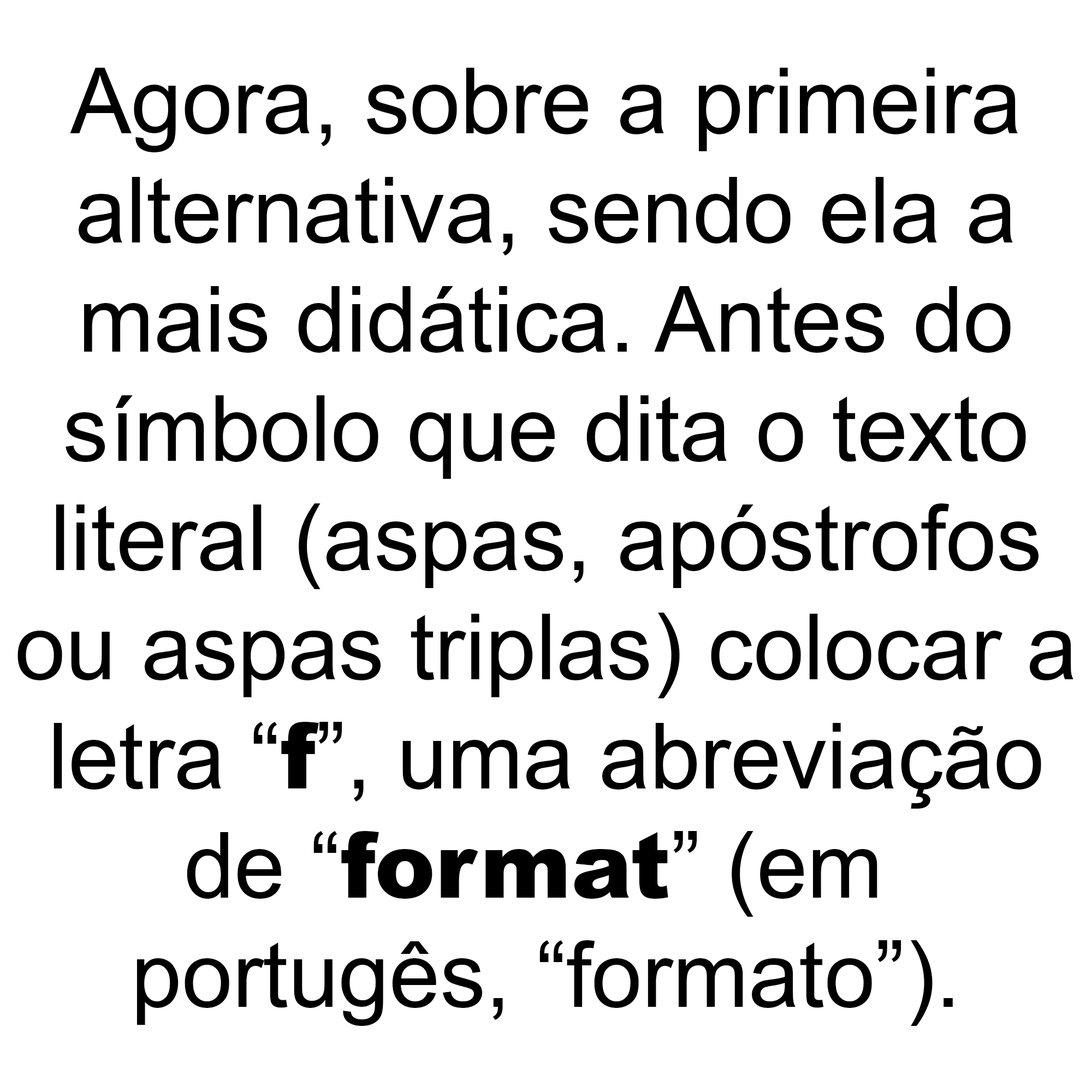
<style>
.page{position:relative;width:1092px;height:1092px;background:#ffffff}
.page>*{position:absolute;margin:0}
.t1{font:91px "ArialMT";color:#000000}
.t2{font:91px "Arial-Black";color:#000000}
</style>
<div class="page">
<p class="t1" style="left:17px;top:68px;width:1056px;height:958px;text-align:center">Agora, sobre a primeira<br>alternativa, sendo ela a<br>mais didática. Antes do<br>símbolo que dita o texto<br>literal (aspas, apóstrofos<br>ou aspas triplas) colocar a<br>letra “<span class="t2">f</span>”, uma abreviação<br>de “<span class="t2">format</span>” (em <br>portugês, “formato”).</p>
</div>
